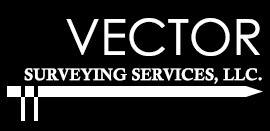
<style>
.page{position:relative;width:270px;height:131px;background:#000000}
.page>*{position:absolute;margin:0}
.t1{font:50px "CenturyGothic";color:#ffffff}
.t2{font:16.7px "CalisMTBol";color:#ffffff}
</style>
<div class="page">
<p class="t1" style="left:66px;top:18px;width:194px;height:38px">VECTOR</p>
<p class="t2" style="left:24px;top:68px;width:238px;height:16px">SURVEYING SERVICES, LLC.</p>
</div>
